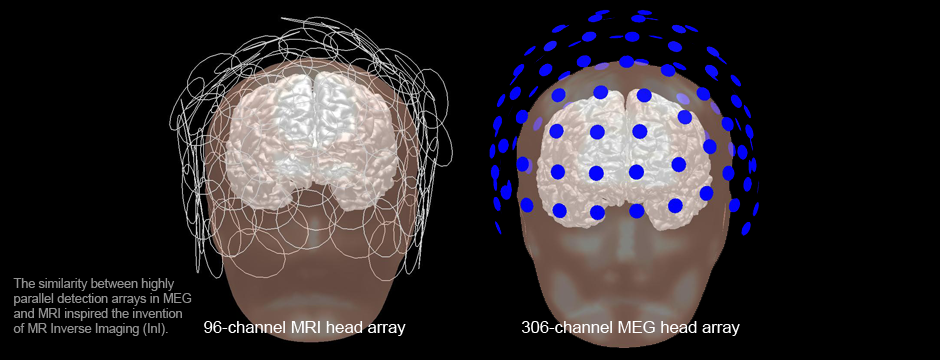
<style>
.page{position:relative;width:940px;height:360px;background:#000000}
.page>*{position:absolute;margin:0}
.t1{font:12.5px "ArialMT";color:#919191}
.t2{font:16.7px "ArialMT";color:#ffffff}
</style>
<div class="page">
<p class="t1" style="left:13px;top:278px;width:179px;height:58px">The similarity between highly<br>parallel detection arrays in MEG<br>and MRI inspired the invention<br>of MR Inverse Imaging (InI).</p>
<p class="t2" style="left:204px;top:321px;width:202px;height:15px">96-channel MRI head array</p>
<p class="t2" style="left:522px;top:321px;width:218px;height:15px">306-channel MEG head array</p>
</div>
